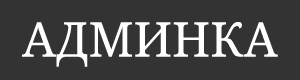
<style>
.page{position:relative;width:300px;height:80px;background:#333333}
.page>*{position:absolute;margin:0}
.t1{font:48px "NotoSerif-Regular";color:#ffffff}
</style>
<div class="page">
<p class="t1" style="left:22px;top:22px;width:256px;height:45px">АДМИНКА</p>
</div>
